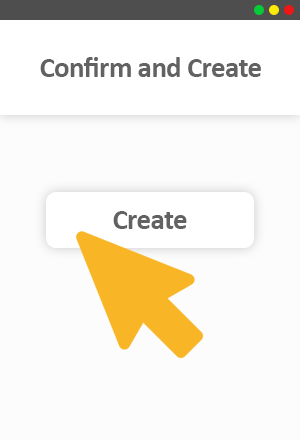
<style>
.page{position:relative;width:300px;height:440px;background:#fcfcfc}
.page>*{position:absolute;margin:0}
.t1{font:29.2px "Calibri-Bold";letter-spacing:-0.025em;color:#626262}
</style>
<div class="page">
<p class="t1" style="left:40px;top:57px;width:221px;height:20px">Confirm and Create</p>
<p class="t1" style="left:113px;top:211px;width:74px;height:18px">Create</p>
</div>
